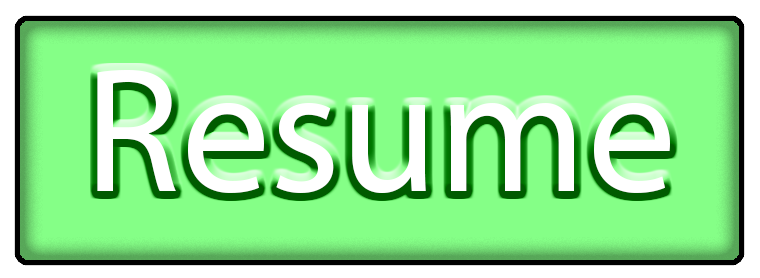
<style>
.page{position:relative;width:760px;height:278px;background:#85ff87}
.page>*{position:absolute;margin:0}
.t1{font:178px "MyriadPro-Regular";color:#ffffff}
</style>
<div class="page">
<p class="t1" style="left:97px;top:70px;width:573px;height:123px">Resume</p>
</div>
